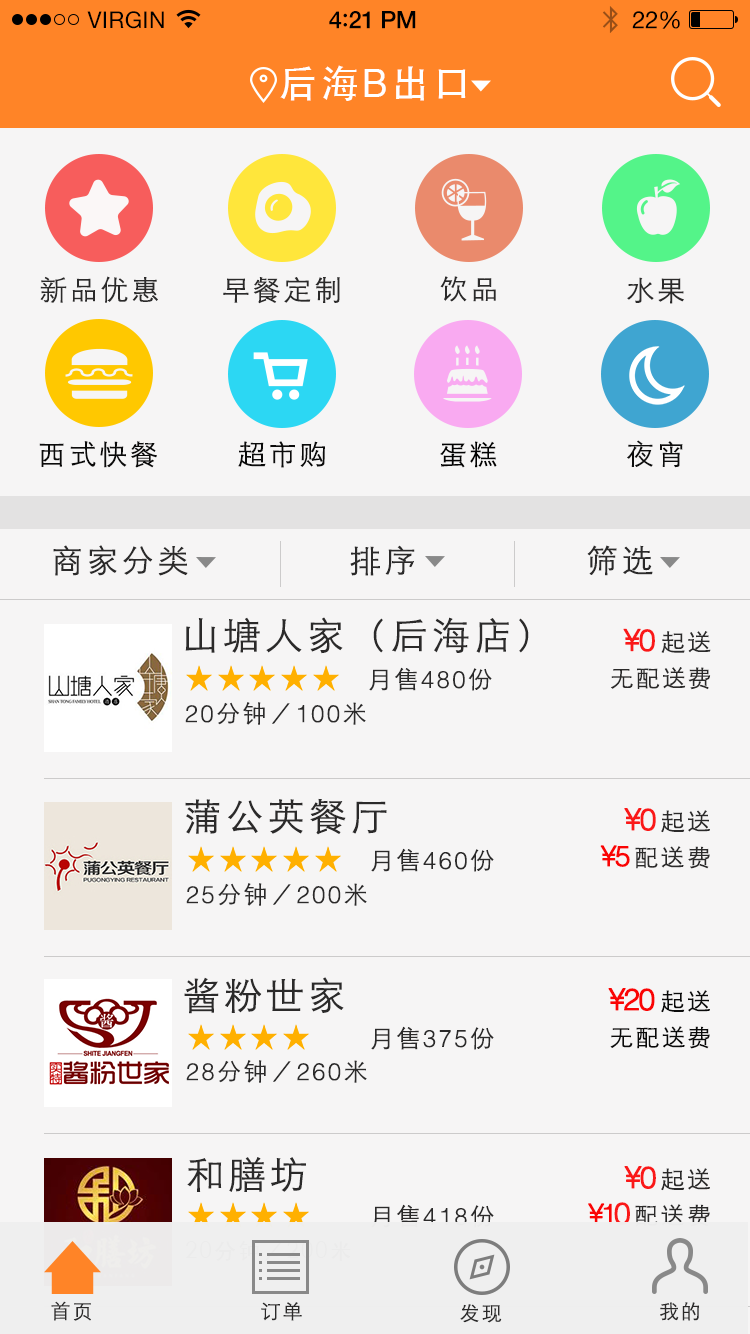
<style>
.page{position:relative;width:750px;height:1334px;background:#f6f5f5}
.page>*{position:absolute;margin:0}
.t1{font:23px "HelveticaNeue";letter-spacing:0.02em;color:#000000}
.t2{font:24px "HelveticaNeue-Medium";letter-spacing:-0.02em;color:#000000}
.t3{font:26px "Avenir-Medium";letter-spacing:-0.02em;color:#000000}
.t4{font:24px "HelveticaNeue";letter-spacing:-0.02em;color:#000000}
.t5{font:38px "STHeiti";letter-spacing:0.1em;color:#ffffff}
.t6{font:38px "Helvetica";letter-spacing:0.1em;color:#ffffff}
.t7{font:28px "STXihei";letter-spacing:0.1em;color:#2b2a2a}
.t8{font:28px "STXihei";letter-spacing:0.1em;color:#0a0a0a}
.t9{font:28px "STXihei";letter-spacing:0.1em;color:#020202}
.t10{font:28px "STXihei";letter-spacing:0.1em;color:#0d0d0d}
.t11{font:32px "STXihei";letter-spacing:0.1em;color:#2b2a2a}
.t12{font:38px "STXihei";letter-spacing:0.1em;color:#2b2a2a}
.t13{font:24px/18px "STXihei";letter-spacing:0.1em;color:#2b2a2a}
.t14{font:24px/18px "STXihei";letter-spacing:0.1em;color:#2b2a2a;font-weight:bold}
.t15{font:30px/18px "Helvetica-Light";letter-spacing:-0.075em;color:#fa1818;font-weight:bold}
.t16{font:24px "Helvetica-Light";letter-spacing:0.1em;color:#2b2a2a}
.t17{font:24px "STXihei";letter-spacing:0.1em;color:#2b2a2a}
.t18{font:24px/14px "STXihei";letter-spacing:0.1em;color:#fa1818;font-weight:bold}
.t19{font:28px/18px "Helvetica-Light";letter-spacing:-0.075em;color:#fa0404;font-weight:bold}
.t20{font:24px/18px "STXihei";letter-spacing:0.1em;color:#0a0a0a}
.t21{font:24px/14px "STXihei";letter-spacing:0.1em;color:#fa0404;font-weight:bold}
.t22{font:30px/18px "Helvetica-Light";letter-spacing:-0.075em;color:#fa0404;font-weight:bold}
.t23{font:24px/14px "STXihei";letter-spacing:0.1em;color:#2b2a2a;font-weight:bold}
.t24{font:20px "STXihei";letter-spacing:0.1em;color:#2b2a2a}
</style>
<div class="page">
<p class="t1" style="left:87px;top:11px;width:77px;height:18px">VIRGIN</p>
<p class="t2" style="left:329px;top:11px;width:87px;height:18px">4<span class="t3">:</span>21 PM</p>
<p class="t4" style="left:632px;top:11px;width:48px;height:18px">22%</p>
<p class="t5" style="left:280px;top:65px;width:186px;height:36px">后海<span class="t6">B</span>出口</p>
<p class="t7" style="left:40px;top:276px;width:118px;height:27px">新品优惠</p>
<p class="t7" style="left:223px;top:277px;width:117px;height:27px">早餐定制</p>
<p class="t7" style="left:440px;top:276px;width:56px;height:26px">饮品</p>
<p class="t7" style="left:627px;top:277px;width:57px;height:27px">水果</p>
<p class="t8" style="left:39px;top:441px;width:118px;height:27px">西式快餐</p>
<p class="t8" style="left:238px;top:441px;width:87px;height:27px">超市购</p>
<p class="t9" style="left:440px;top:441px;width:57px;height:27px">蛋糕</p>
<p class="t10" style="left:627px;top:440px;width:56px;height:28px">夜宵</p>
<p class="t11" style="left:53px;top:545px;width:135px;height:31px">商家分类</p>
<p class="t11" style="left:350px;top:545px;width:65px;height:31px">排序</p>
<p class="t11" style="left:587px;top:545px;width:66px;height:31px">筛选</p>
<p class="t12" style="left:185px;top:617px;width:344px;height:37px">山塘人家（后海店）</p>
<p class="t13" style="left:611px;top:628px;width:100px;height:62px;text-align:right"><span class="t14">    </span><span class="t15">¥0 </span>起送<br><br>无配送费</p>
<p class="t16" style="left:369px;top:667px;width:123px;height:24px"><span class="t17">月售</span>480<span class="t17">份</span></p>
<p class="t17" style="left:185px;top:702px;width:181px;height:23px"><span class="t16">20</span>分钟／<span class="t16">100</span>米</p>
<p class="t12" style="left:185px;top:798px;width:202px;height:37px">蒲公英餐厅</p>
<p class="t13" style="left:600px;top:808px;width:110px;height:61px;text-align:right"><span class="t18">    </span><span class="t15">¥0 </span>起送<br><br> <span class="t19">¥5 </span>配送费</p>
<p class="t16" style="left:371px;top:848px;width:123px;height:24px"><span class="t17">月售</span>460<span class="t17">份</span></p>
<p class="t17" style="left:186px;top:883px;width:181px;height:23px"><span class="t16">25</span>分钟／<span class="t16">200</span>米</p>
<p class="t12" style="left:184px;top:977px;width:160px;height:37px">酱粉世家</p>
<p class="t20" style="left:608px;top:988px;width:102px;height:61px;text-align:right"><span class="t21">    </span><span class="t22">¥20 </span>起送<br><br>无配送费</p>
<p class="t16" style="left:371px;top:1026px;width:123px;height:24px"><span class="t17">月售</span>375<span class="t17">份</span></p>
<p class="t17" style="left:186px;top:1060px;width:181px;height:23px"><span class="t16">28</span>分钟／<span class="t16">260</span>米</p>
<p class="t12" style="left:187px;top:1157px;width:119px;height:35px">和膳坊</p>
<p class="t13" style="left:588px;top:1166px;width:122px;height:61px;text-align:right"><span class="t23">    </span><span class="t15">¥0 </span>起送<br><br> <span class="t19">¥1</span><span class="t15">0 </span>配送费</p>
<p class="t16" style="left:371px;top:1204px;width:123px;height:24px"><span class="t17">月售</span>418<span class="t17">份</span></p>
<p class="t24" style="left:51px;top:1301px;width:40px;height:20px">首页</p>
<p class="t24" style="left:261px;top:1302px;width:41px;height:19px">订单</p>
<p class="t24" style="left:660px;top:1302px;width:39px;height:19px">我的</p>
<p class="t24" style="left:460px;top:1304px;width:42px;height:19px">发现</p>
</div>
